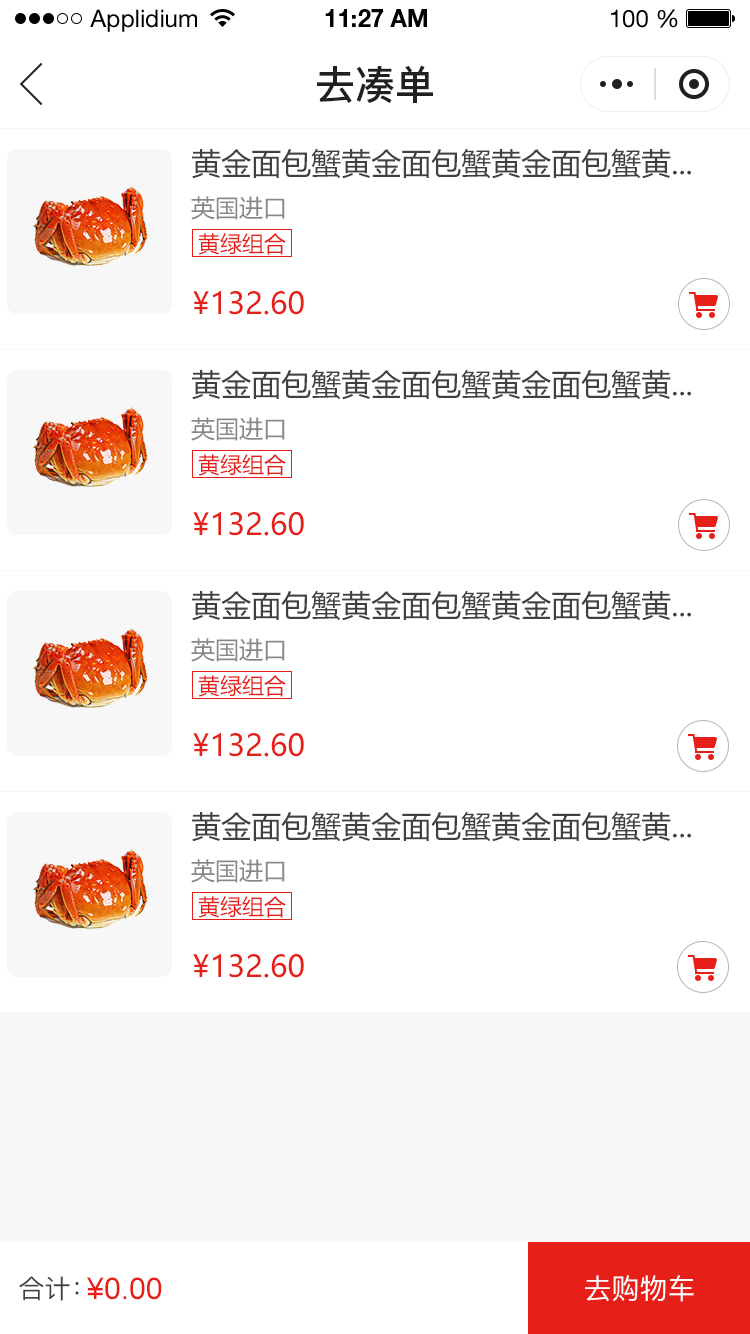
<style>
.page{position:relative;width:750px;height:1334px;background:#ffffff}
.page>*{position:absolute;margin:0}
.t1{font:24px "HelveticaNeueLTStd-Roman";color:#000000}
.t2{font:24px "HelveticaNeueLTStd-Bd";color:#000000}
.t3{font:40px "PingFang-SC-Bold";color:#202020;text-transform:uppercase}
.t4{font:30px "MicrosoftYaHei";color:#404040;text-transform:uppercase}
.t5{font:24px "MicrosoftYaHei";color:#888888;text-transform:uppercase}
.t6{font:22px "MicrosoftYaHei";color:#e61f18;text-transform:uppercase}
.t7{font:30px "MicrosoftYaHei";color:#e61f18;text-transform:uppercase}
.t8{font:26px "PingFang-SC-Medium";color:#404040;text-transform:uppercase}
.t9{font:30px "ArialMT";color:#e61f18;text-transform:uppercase}
.t10{font:28px "PingFang-SC-Medium";color:#fffefe;text-transform:uppercase}
</style>
<div class="page">
<p class="t1" style="left:90px;top:9px;width:107px;height:23px">Applidium</p>
<p class="t2" style="left:325px;top:9px;width:102px;height:18px">11:27 AM</p>
<p class="t1" style="left:611px;top:9px;width:67px;height:19px">100 %</p>
<p class="t3" style="left:317px;top:65px;width:116px;height:38px">去凑单</p>
<p class="t4" style="left:192px;top:148px;width:499px;height:31px">黄金面包蟹黄金面包蟹黄金面包蟹黄...</p>
<p class="t5" style="left:191px;top:196px;width:94px;height:24px">英国进口</p>
<p class="t6" style="left:198px;top:233px;width:88px;height:22px">黄绿组合</p>
<p class="t7" style="left:193px;top:291px;width:111px;height:24px">¥132.60</p>
<p class="t4" style="left:192px;top:369px;width:499px;height:31px">黄金面包蟹黄金面包蟹黄金面包蟹黄...</p>
<p class="t5" style="left:191px;top:417px;width:94px;height:24px">英国进口</p>
<p class="t6" style="left:198px;top:454px;width:88px;height:22px">黄绿组合</p>
<p class="t7" style="left:193px;top:512px;width:111px;height:24px">¥132.60</p>
<p class="t4" style="left:192px;top:590px;width:499px;height:31px">黄金面包蟹黄金面包蟹黄金面包蟹黄...</p>
<p class="t5" style="left:191px;top:638px;width:94px;height:24px">英国进口</p>
<p class="t6" style="left:198px;top:675px;width:88px;height:22px">黄绿组合</p>
<p class="t7" style="left:193px;top:733px;width:111px;height:24px">¥132.60</p>
<p class="t4" style="left:192px;top:811px;width:499px;height:31px">黄金面包蟹黄金面包蟹黄金面包蟹黄...</p>
<p class="t5" style="left:191px;top:859px;width:94px;height:24px">英国进口</p>
<p class="t6" style="left:198px;top:896px;width:88px;height:22px">黄绿组合</p>
<p class="t7" style="left:193px;top:954px;width:111px;height:24px">¥132.60</p>
<p class="t8" style="left:19px;top:1276px;width:60px;height:25px">合计：</p>
<p class="t9" style="left:87px;top:1277px;width:75px;height:23px">¥0.00</p>
<p class="t10" style="left:585px;top:1275px;width:109px;height:27px">去购物车</p>
</div>
